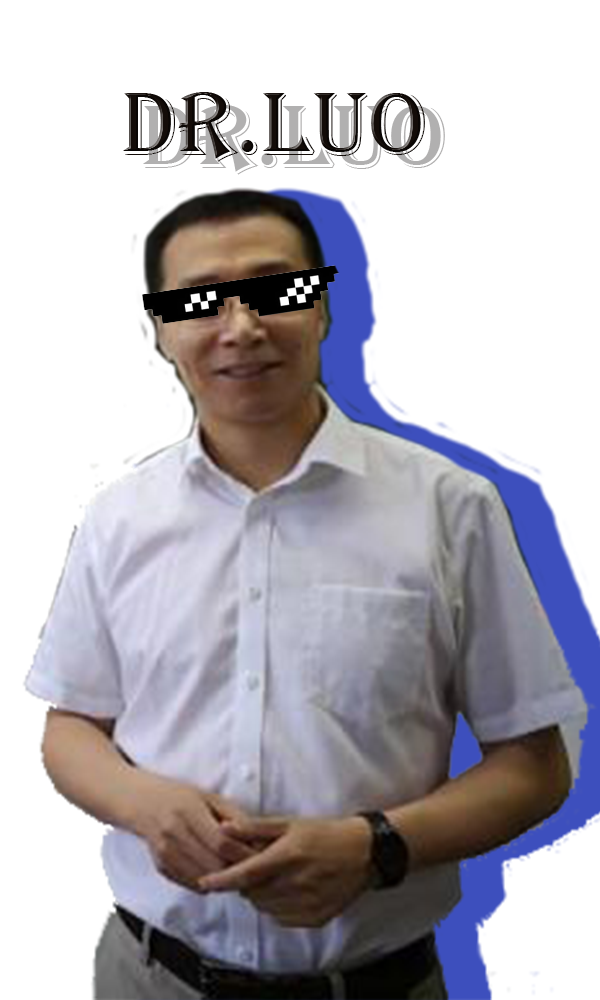
<style>
.page{position:relative;width:600px;height:1000px;background:#ffffff}
.page>*{position:absolute;margin:0}
.t1{font:93.2px "Algerian";color:#130c08}
</style>
<div class="page">
<p class="t1" style="left:123px;top:92px;width:302px;height:70px">Dr.Luo</p>
</div>
